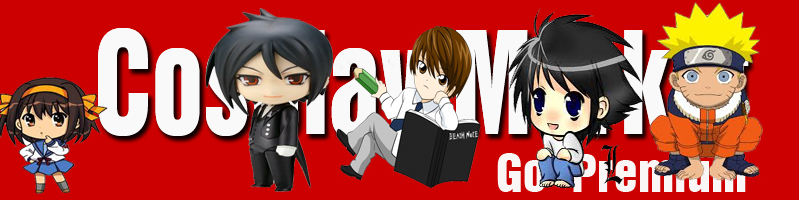
<style>
.page{position:relative;width:799px;height:200px;background:#cc0000}
.page>*{position:absolute;margin:0}
.t1{font:130.3px "Swiss921BT-RegularA";letter-spacing:0.005em;scale:0.8 1}
.t2{font:48px "Swiss921BT-RegularA";letter-spacing:0.005em;color:#faf6f6}
</style>
<div class="page">
<p class="t1" style="left:98px;top:28px;width:651px;height:121px">Cosplay Market</p>
<p class="t1" style="left:98px;top:28px;width:651px;height:121px">Cosplay Market</p>
<p class="t2" style="left:497px;top:153px;width:249px;height:39px">Go  Premium</p>
</div>
